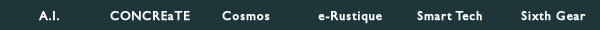
<style>
.page{position:relative;width:600px;height:30px;background:#1e3639}
.page>*{position:absolute;margin:0}
.t1{font:13.1px "GillSans";letter-spacing:0.06em;color:#ffffff;font-weight:bold;scale:0.95 1}
.t2{font:13.1px "GillSans";letter-spacing:0.06em;color:#fefefe;font-weight:bold;scale:0.95 1}
</style>
<div class="page">
<p class="t1" style="left:39px;top:11px;width:21px;height:10px">A.I.</p>
<p class="t2" style="left:110px;top:11px;width:80px;height:10px">CONCREaTE</p>
<p class="t2" style="left:222px;top:11px;width:48px;height:10px">Cosmos</p>
<p class="t2" style="left:318px;top:11px;width:64px;height:13px">e-Rustique</p>
<p class="t2" style="left:417px;top:11px;width:65px;height:10px">Smart Tech</p>
<p class="t2" style="left:521px;top:11px;width:65px;height:10px">Sixth Gear</p>
</div>
